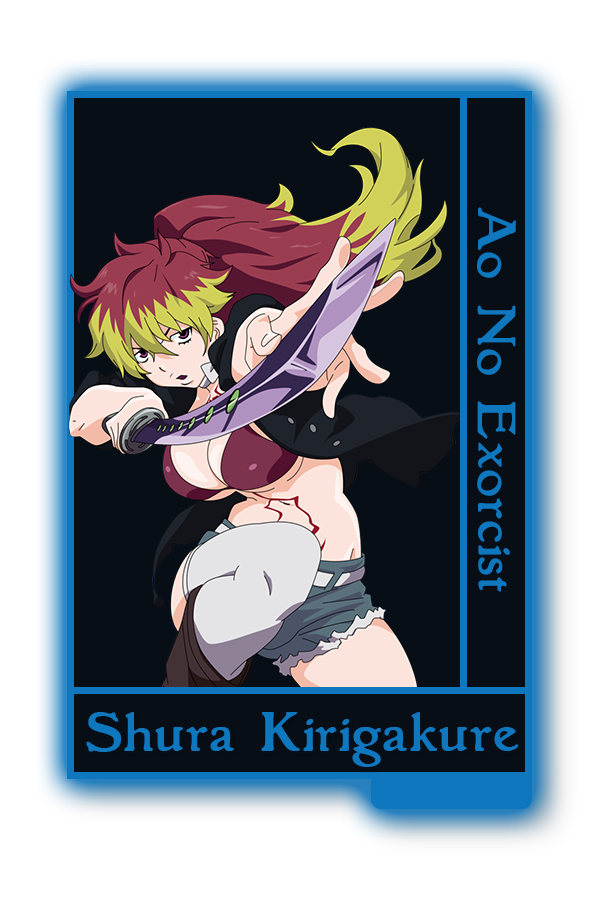
<style>
.page{position:relative;width:600px;height:900px;background:#070e16}
.page>*{position:absolute;margin:0}
.t1{font:48.8px "Grantham-Roman";color:#0f77be}
.t2{font:50.5px "Grantham-Roman";color:#0f77be}
</style>
<div class="page">
<p class="t1" style="left:477px;top:207px;width:39px;height:385px;rotate:90deg">Ao No Exorcist</p>
<p class="t2" style="left:86px;top:712px;width:433px;height:55px">Shura Kirigakure</p>
</div>
